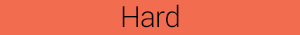
<style>
.page{position:relative;width:300px;height:35px;background:#f26c4f}
.page>*{position:absolute;margin:0}
.t1{font:29.3px "Roboto-Light";letter-spacing:-0.02em;color:#000000}
</style>
<div class="page">
<p class="t1" style="left:122px;top:4px;width:57px;height:24px">Hard</p>
</div>
